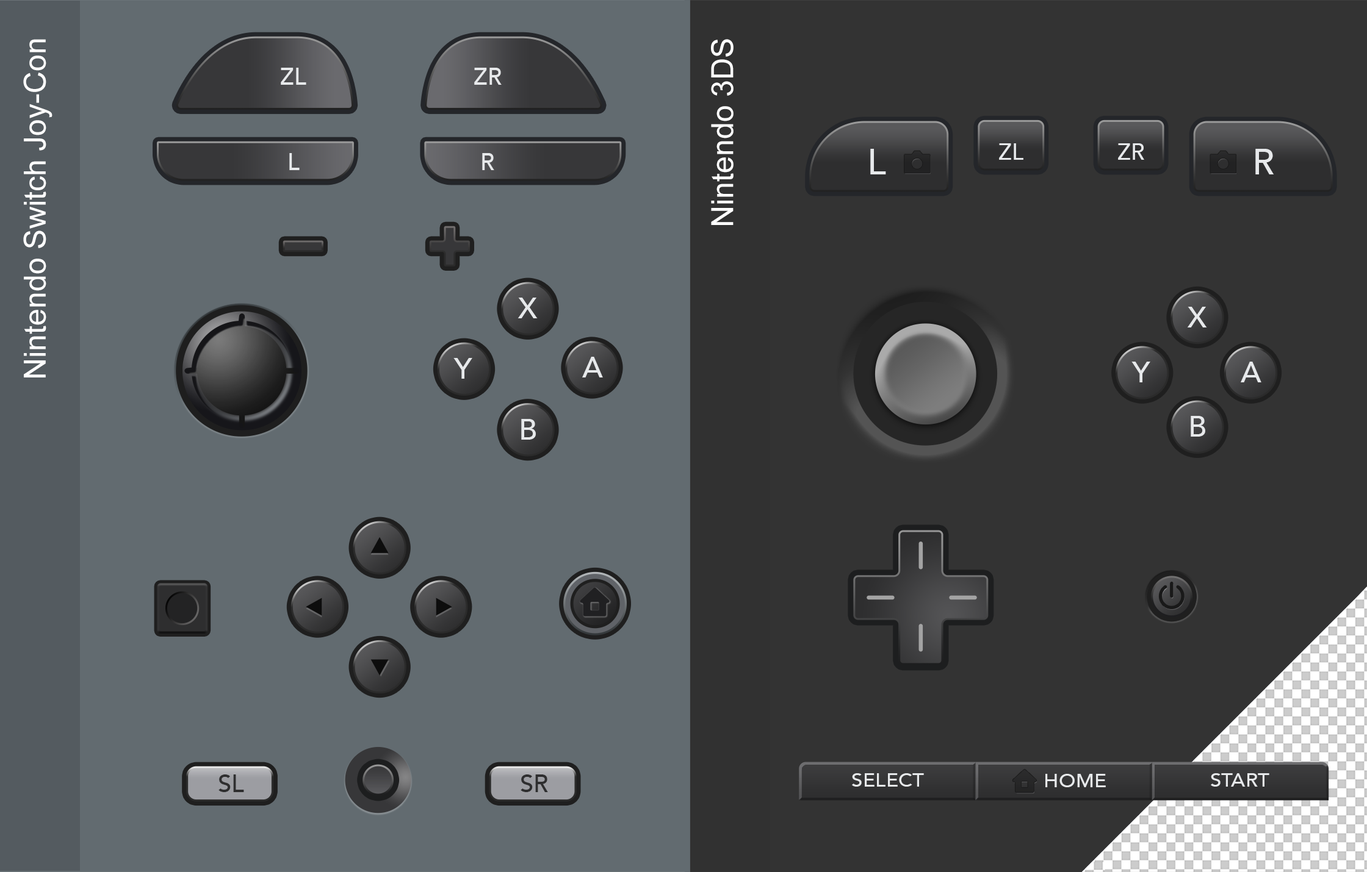
<style>
.page{position:relative;width:1367px;height:872px;background:#626b70}
.page>*{position:absolute;margin:0}
.t1{font:30.5px "ArialMT";color:#ffffff}
.t2{font:23.4px "Avenir-Medium";color:#e7e9eb}
.t3{font:36.2px "Avenir-Medium";color:#e7e9eb}
.t4{font:22.6px "Avenir-Medium";color:#e7e9eb}
.t5{font:29.5px "Avenir-Medium";color:#e7e9eb}
.t6{font:18.4px "Avenir-Medium";color:#e7e9eb;scale:1.11 1}
.t7{font:24.2px "Avenir-Medium";color:#2e2e2f}
</style>
<div class="page">
<p class="t1" style="left:23px;top:39px;width:29px;height:339px;rotate:-90deg">Nintendo Switch Joy-Con</p>
<p class="t1" style="left:711px;top:39px;width:22px;height:186px;rotate:-90deg">Nintendo 3DS</p>
<p class="t2" style="left:281px;top:68px;width:25px;height:17px">ZL</p>
<p class="t2" style="left:474px;top:68px;width:28px;height:17px">ZR</p>
<p class="t3" style="left:870px;top:149px;width:16px;height:25px">L</p>
<p class="t4" style="left:999px;top:143px;width:24px;height:17px">ZL</p>
<p class="t4" style="left:1118px;top:143px;width:26px;height:17px">ZR</p>
<p class="t3" style="left:1255px;top:149px;width:19px;height:25px">R</p>
<p class="t2" style="left:289px;top:153px;width:11px;height:17px">L</p>
<p class="t2" style="left:482px;top:153px;width:12px;height:17px">R</p>
<p class="t5" style="left:517px;top:298px;width:21px;height:20px">X</p>
<p class="t5" style="left:1187px;top:307px;width:20px;height:21px">X</p>
<p class="t5" style="left:453px;top:358px;width:19px;height:21px">Y</p>
<p class="t5" style="left:582px;top:357px;width:21px;height:21px">A</p>
<p class="t5" style="left:1131px;top:362px;width:19px;height:21px">Y</p>
<p class="t5" style="left:1240px;top:362px;width:21px;height:21px">A</p>
<p class="t5" style="left:521px;top:419px;width:15px;height:21px">B</p>
<p class="t5" style="left:1190px;top:416px;width:15px;height:21px">B</p>
<p class="t6" style="left:852px;top:774px;width:72px;height:13px">SELECT</p>
<p class="t6" style="left:1211px;top:774px;width:58px;height:13px">START</p>
<p class="t7" style="left:218px;top:775px;width:26px;height:18px">SL</p>
<p class="t7" style="left:520px;top:775px;width:28px;height:18px">SR</p>
<p class="t6" style="left:1045px;top:774px;width:61px;height:14px">HOME</p>
</div>
